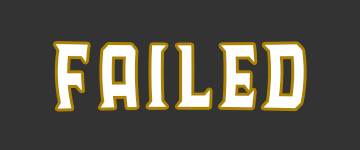
<style>
.page{position:relative;width:360px;height:150px;background:#333333}
.page>*{position:absolute;margin:0}
.t1{font:93.8px "Lorde-Havana";letter-spacing:0.1em;color:#ffffff;scale:0.75 1}
</style>
<div class="page">
<p class="t1" style="left:55px;top:44px;width:249px;height:65px">FAILED</p>
</div>
